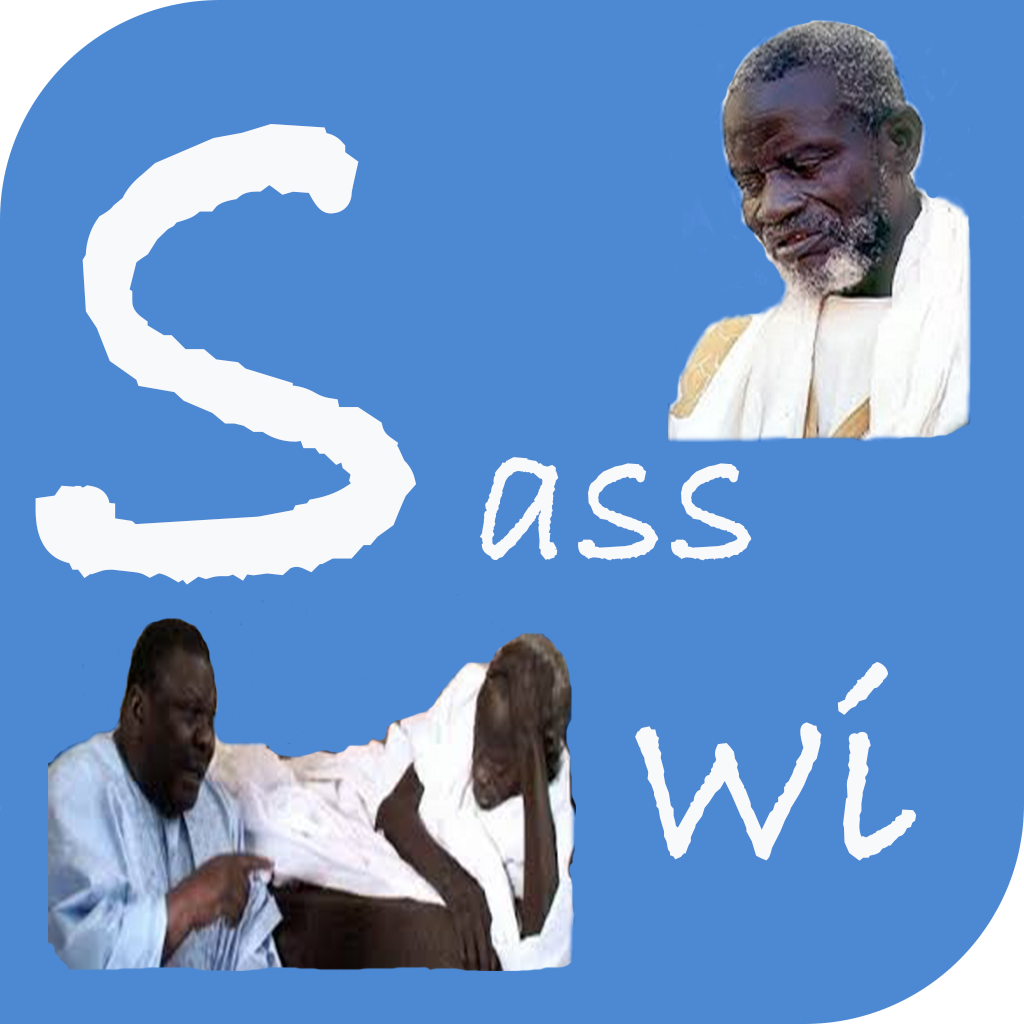
<style>
.page{position:relative;width:1024px;height:1024px;background:#4d89d3}
.page>*{position:absolute;margin:0}
.t1{font:200px "BradleyHandITC";color:#f8f9fa;font-weight:bold}
.t2{font:950px "BradleyHandITC";color:#f8f9fa;font-weight:bold}
.t3{font:283.3px "BradleyHandITC";color:#f8f9fa;font-weight:bold}
</style>
<div class="page">
<p class="t1" style="left:35px;top:124px;width:717px;height:461px"><span class="t2">s</span>ass</p>
<p class="t3" style="left:635px;top:661px;width:282px;height:200px">wi</p>
</div>
